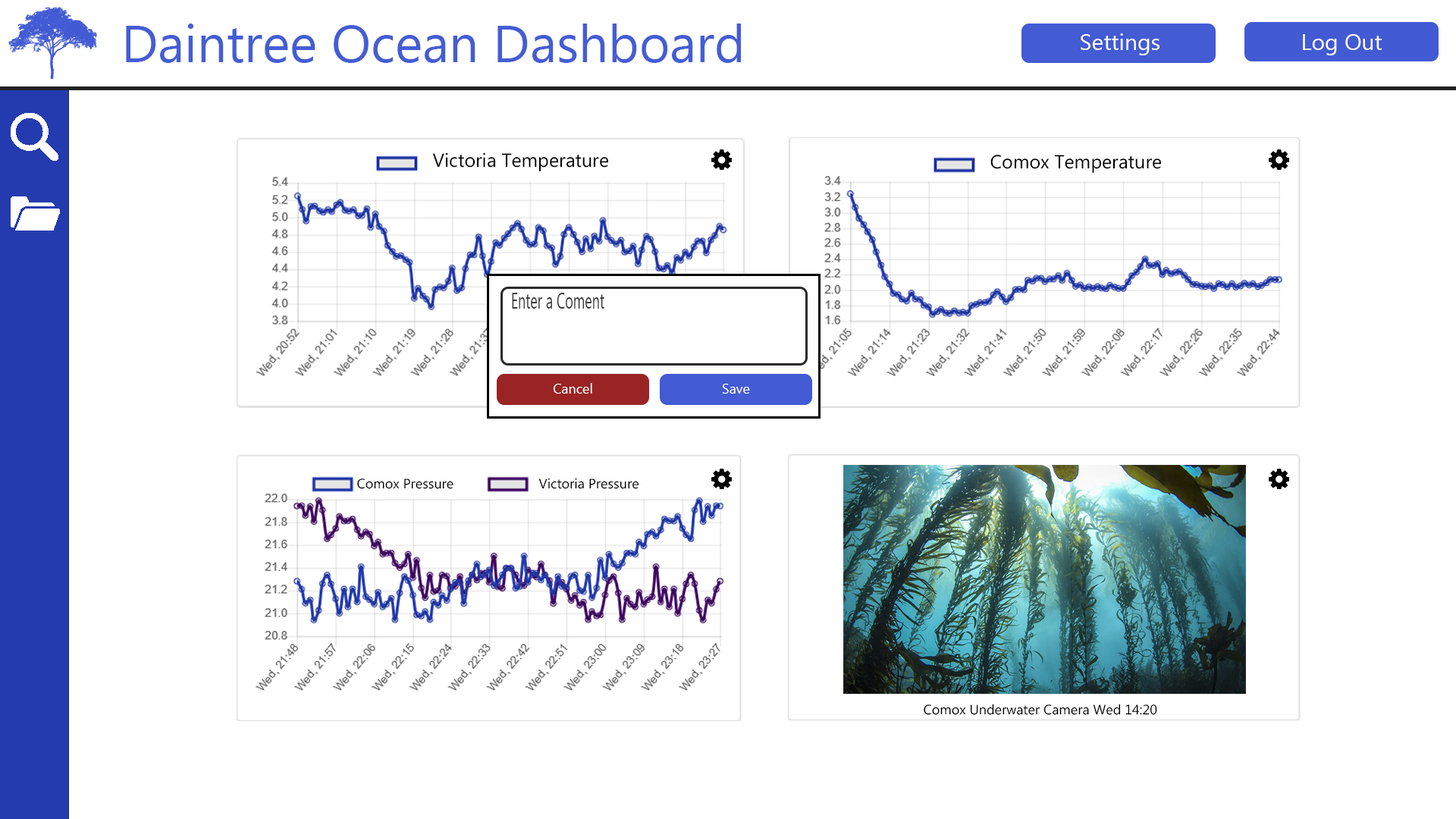
<style>
.page{position:relative;width:1456px;height:819px;background:#ffffff}
.page>*{position:absolute;margin:0}
.t1{font:52.3px "MyanmarText";color:#455dd4}
.t2{font:22.7px "MyanmarText";color:#ffffff}
.t3{font:19px "MyanmarText";color:#000000}
.t4{font:22.7px "MyanmarText";color:#3b3b3b;scale:0.6 1}
.t5{font:13.7px "MyanmarText";color:#ffffff}
.t6{font:13.6px "MyanmarText";color:#000000}
</style>
<div class="page">
<p class="t1" style="left:126px;top:24px;width:615px;height:39px">Daintree Ocean Dashboard</p>
<p class="t2" style="left:1081px;top:33px;width:78px;height:22px">Settings</p>
<p class="t2" style="left:1303px;top:34px;width:79px;height:21px">Log Out</p>
<p class="t3" style="left:432px;top:152px;width:177px;height:19px">Victoria Temperature</p>
<p class="t3" style="left:990px;top:155px;width:172px;height:18px">Comox Temperature</p>
<p class="t4" style="left:512px;top:293px;width:92px;height:16px">Enter a Coment</p>
<p class="t5" style="left:554px;top:383px;width:38px;height:11px">Cancel</p>
<p class="t5" style="left:722px;top:384px;width:28px;height:10px">Save</p>
<p class="t6" style="left:357px;top:479px;width:96px;height:10px">Comox Pressure</p>
<p class="t6" style="left:538px;top:478px;width:101px;height:11px">Victoria Pressure</p>
<p class="t6" style="left:924px;top:704px;width:233px;height:11px">Comox Underwater Camera Wed 14:20</p>
</div>
